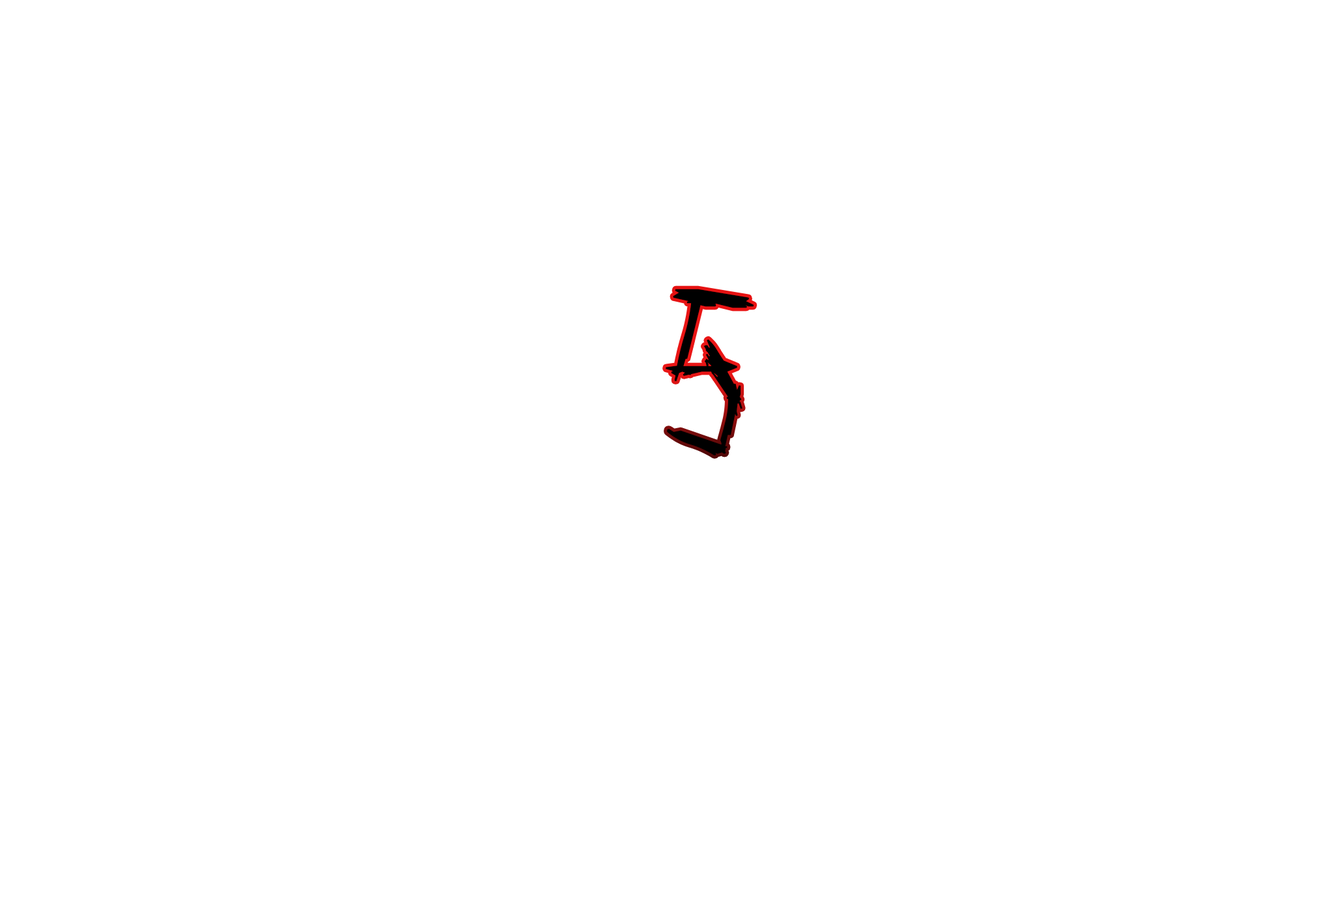
<style>
.page{position:relative;width:1328px;height:898px;background:#ffffff}
.page>*{position:absolute;margin:0}
.t1{font:199.3px "onryou";color:#000000;font-weight:bold}
</style>
<div class="page">
<p class="t1" style="left:666px;top:289px;width:88px;height:166px">5</p>
</div>
